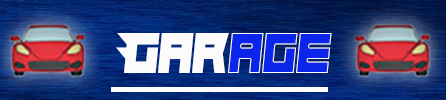
<style>
.page{position:relative;width:446px;height:100px}
.page>*{position:absolute;margin:0}
.t1{font:58.3px "Hindsight2020";color:#fbfbfb;scale:0.92 1}
.t2{font:58.3px "Hindsight2020";color:#0b25eb;scale:0.92 1}
</style>
<div class="page">
<p class="t1" style="left:116px;top:33px;width:113px;height:40px">Gar</p>
<p class="t2" style="left:228px;top:33px;width:104px;height:40px">age</p>
</div>
